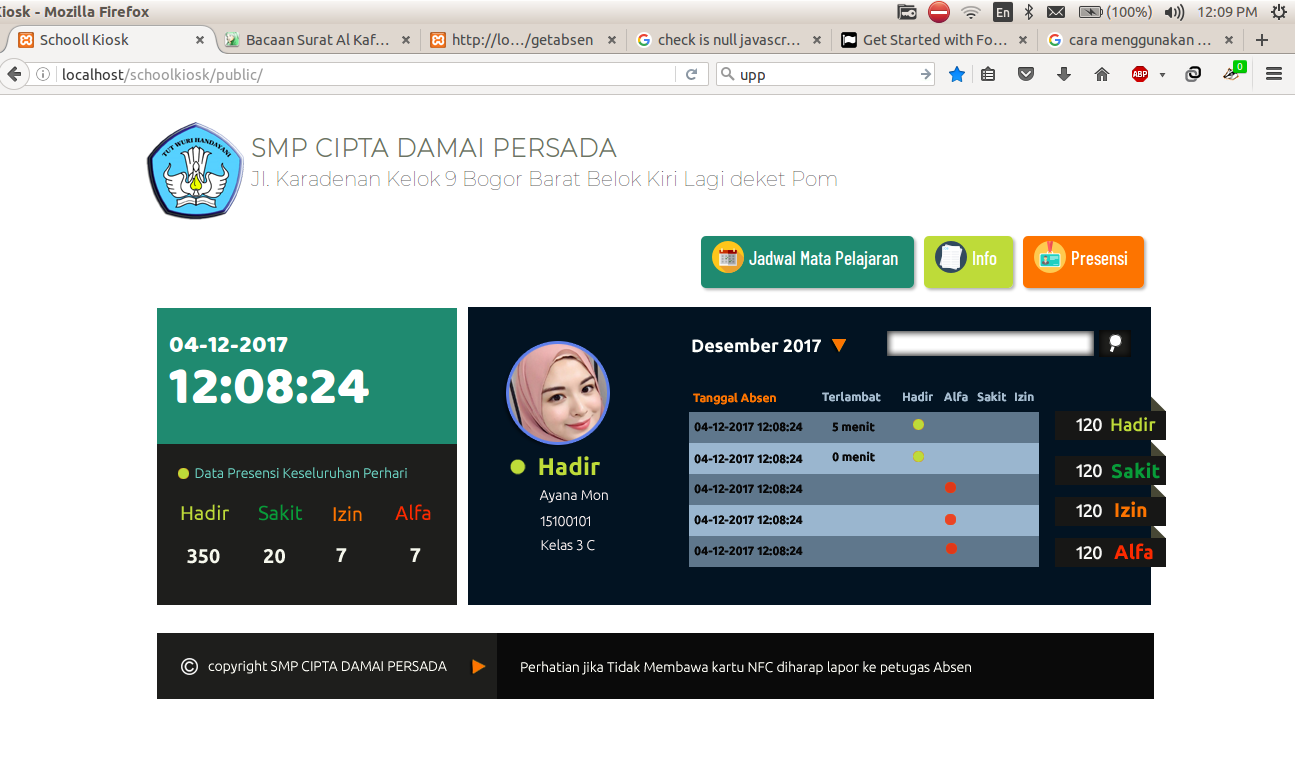
<style>
.page{position:relative;width:1295px;height:768px;background:#ffffff}
.page>*{position:absolute;margin:0}
.t1{font:18px "Ubuntu-Bold";color:#fefffc}
.t2{font:12px "Ubuntu-Bold";color:#fd7400}
.t3{font:12px "Ubuntu-Bold";color:#a6bccf}
.t4{font:12px "Ubuntu-Bold";color:#070707}
.t5{font:12px "Ubuntu-Bold";color:#080808}
.t6{font:18px "Ubuntu-Medium";color:#f7f7f5}
.t7{font:18px "Ubuntu-Medium";color:#bedb39}
.t8{font:24px "Ubuntu-Bold";color:#bedb39}
.t9{font:20px "Ubuntu-Bold";color:#089c39}
.t10{font:14px "Ubuntu-Light";color:#6bd2c2}
.t11{font:14px "Ubuntu-Light";color:#f7eeee}
.t12{font:20px "Ubuntu";color:#bedb39}
.t13{font:20px "Ubuntu";color:#089c39}
.t14{font:20px "Ubuntu";color:#fd7400}
.t15{font:20px "Ubuntu";color:#fd2a00}
.t16{font:20px "Ubuntu-Bold";color:#fd7400}
.t17{font:20px "Ubuntu-Bold";color:#fd2a00}
.t18{font:20px "Ubuntu-Bold";color:#f6f8ed}
.t19{font:14px "Ubuntu-Light";color:#fffff8}
</style>
<div class="page">
<p class="t1" style="left:692px;top:338px;width:129px;height:15px">Desember 2017</p>
<p class="t2" style="left:693px;top:392px;width:83px;height:13px">Tanggal Absen</p>
<p class="t3" style="left:822px;top:391px;width:59px;height:11px">Terlambat</p>
<p class="t3" style="left:903px;top:391px;width:30px;height:11px">Hadir</p>
<p class="t3" style="left:944px;top:391px;width:24px;height:11px">Alfa</p>
<p class="t3" style="left:977px;top:391px;width:30px;height:11px">Sakit</p>
<p class="t3" style="left:1015px;top:391px;width:19px;height:10px">Izin</p>
<p class="t4" style="left:694px;top:422px;width:109px;height:10px">04-12-2017 12:08:24</p>
<p class="t5" style="left:832px;top:421px;width:43px;height:11px">5 menit</p>
<p class="t6" style="left:1076px;top:418px;width:26px;height:14px">120</p>
<p class="t7" style="left:1111px;top:417px;width:45px;height:15px">Hadir</p>
<p class="t8" style="left:539px;top:456px;width:61px;height:20px">Hadir</p>
<p class="t4" style="left:694px;top:454px;width:109px;height:10px">04-12-2017 12:08:24</p>
<p class="t5" style="left:832px;top:451px;width:43px;height:11px">0 menit</p>
<p class="t9" style="left:1111px;top:462px;width:49px;height:17px">Sakit</p>
<p class="t10" style="left:195px;top:467px;width:212px;height:11px">Data Presensi Keseluruhan Perhari</p>
<p class="t6" style="left:1076px;top:464px;width:26px;height:14px">120</p>
<p class="t4" style="left:694px;top:484px;width:109px;height:10px">04-12-2017 12:08:24</p>
<p class="t11" style="left:539px;top:490px;width:69px;height:13px">Ayana Mon</p>
<p class="t12" style="left:181px;top:504px;width:48px;height:16px">Hadir</p>
<p class="t13" style="left:258px;top:504px;width:45px;height:17px">Sakit</p>
<p class="t14" style="left:333px;top:506px;width:29px;height:15px">Izin</p>
<p class="t15" style="left:395px;top:504px;width:36px;height:16px">Alfa</p>
<p class="t6" style="left:1076px;top:504px;width:26px;height:14px">120</p>
<p class="t16" style="left:1115px;top:501px;width:32px;height:16px">Izin</p>
<p class="t11" style="left:540px;top:516px;width:50px;height:11px">15100101</p>
<p class="t4" style="left:694px;top:515px;width:109px;height:10px">04-12-2017 12:08:24</p>
<p class="t11" style="left:541px;top:539px;width:54px;height:12px">Kelas 3 C</p>
<p class="t17" style="left:1114px;top:543px;width:39px;height:17px">Alfa</p>
<p class="t18" style="left:187px;top:549px;width:33px;height:15px">350</p>
<p class="t18" style="left:263px;top:549px;width:22px;height:15px">20</p>
<p class="t18" style="left:336px;top:548px;width:11px;height:14px">7</p>
<p class="t18" style="left:410px;top:548px;width:11px;height:14px">7</p>
<p class="t4" style="left:694px;top:546px;width:109px;height:10px">04-12-2017 12:08:24</p>
<p class="t6" style="left:1076px;top:546px;width:26px;height:14px">120</p>
<p class="t19" style="left:208px;top:660px;width:239px;height:14px">copyright SMP CIPTA DAMAI PERSADA</p>
<p class="t19" style="left:521px;top:661px;width:450px;height:14px">Perhatian jika Tidak Membawa kartu NFC diharap lapor ke petugas Absen</p>
</div>
